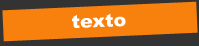
<style>
.page{position:relative;width:199px;height:46px;background:#f8800d}
.page>*{position:absolute;margin:0}
.t1{font:18px "Arial-Black";color:#ffffff;scale:1.06 1}
</style>
<div class="page">
<p class="t1" style="left:72px;top:13px;width:54px;height:15px;rotate:-2deg">texto</p>
</div>
